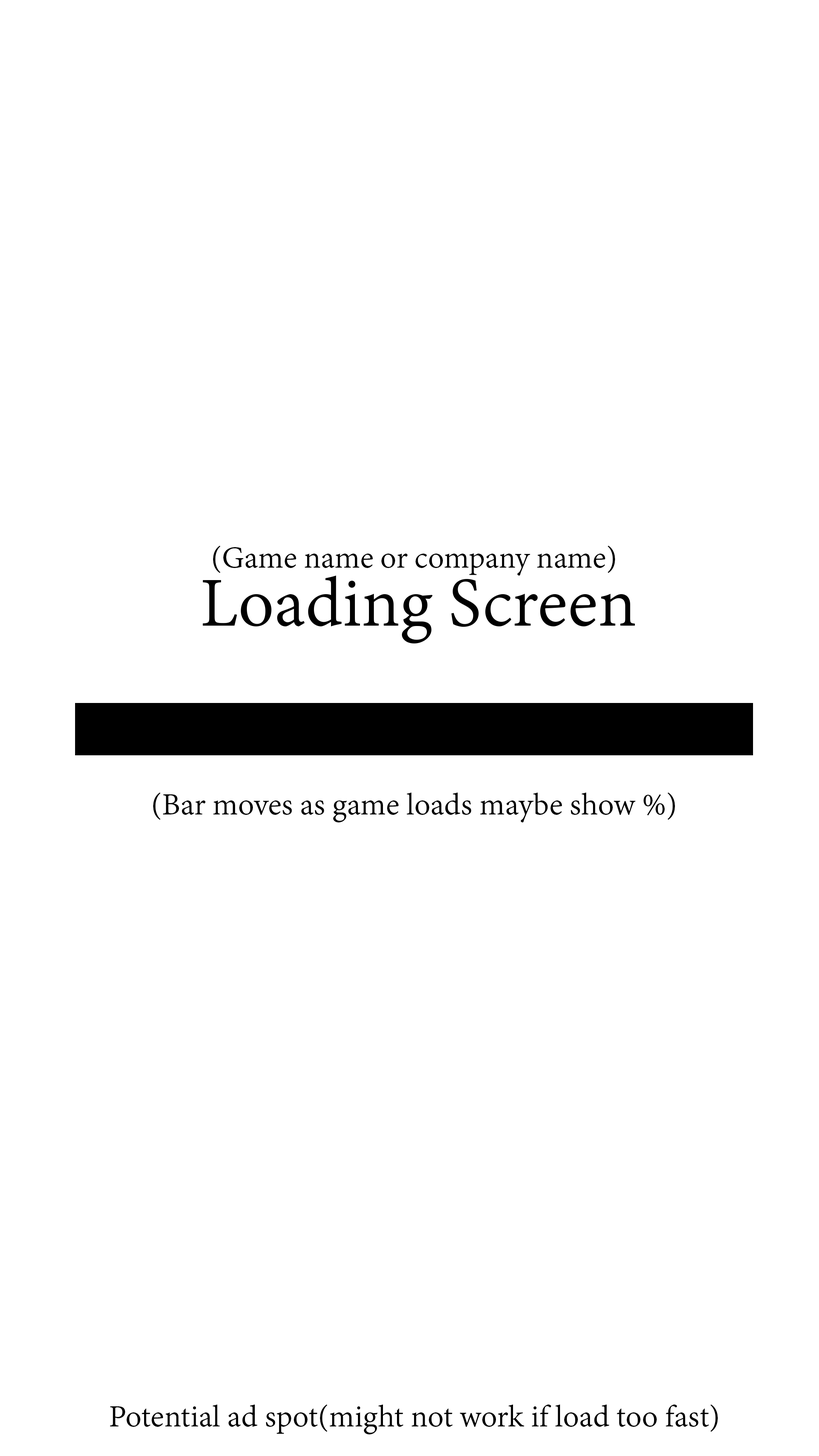
<style>
.page{position:relative;width:819px;height:1456px;background:#ffffff}
.page>*{position:absolute;margin:0}
.t1{font:33.7px "AdobeDevanagari-Regular";color:#000000}
</style>
<div class="page">
<p class="t1" style="left:213px;top:546px;width:402px;height:30px">(Game name or company name)</p>
<p class="t1" style="left:153px;top:792px;width:522px;height:30px">(Bar moves as game loads maybe show %)</p>
<p class="t1" style="left:110px;top:1404px;width:608px;height:30px">Potential ad spot(might not work if load too fast)</p>
</div>
